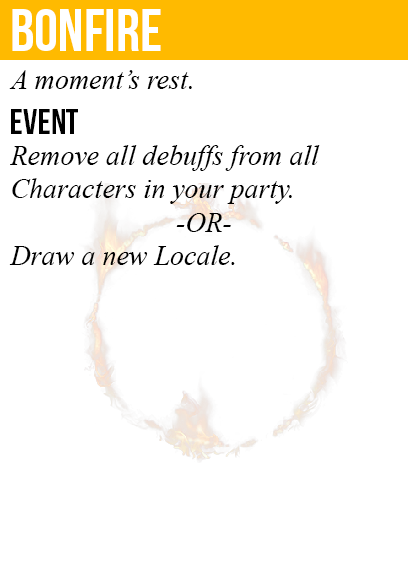
<style>
.page{position:relative;width:408px;height:585px;background:#ffffff}
.page>*{position:absolute;margin:0}
.t1{font:60px "BebasNeue";color:#ffffff}
.t2{font:28px "TimesNewRomanPS-ItalicMT";color:#000000}
.t3{font:36px "BebasNeue";color:#000000}
</style>
<div class="page">
<p class="t1" style="left:12px;top:9px;width:149px;height:42px">bonfire</p>
<p class="t2" style="left:9px;top:70px;width:183px;height:19px">A moment’s rest.</p>
<p class="t3" style="left:11px;top:109px;width:67px;height:25px">event</p>
<p class="t2" style="left:9px;top:145px;width:311px;height:120px">Remove all debuffs from all<br>Characters in your party.<br><br>Draw a new Locale.</p>
<p class="t2" style="left:176px;top:213px;width:55px;height:19px">-OR-</p>
</div>
